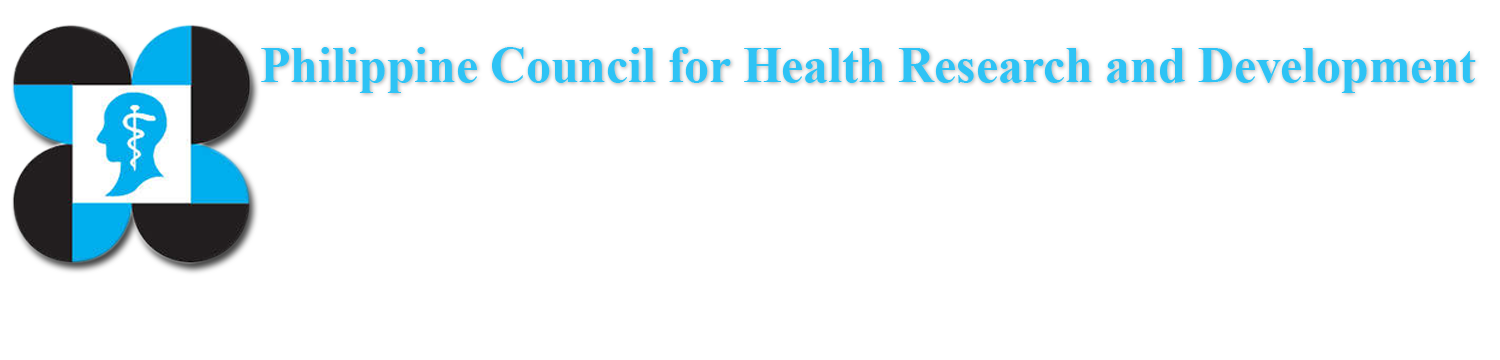
<style>
.page{position:relative;width:1500px;height:360px;background:#ffffff}
.page>*{position:absolute;margin:0}
.t1{font:51px "TimesNewRomanPS-BoldMT";color:#2ec3f5}
</style>
<div class="page">
<p class="t1" style="left:261px;top:47px;width:1215px;height:46px">Philippine Council for Health Research and Development</p>
</div>
